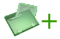
<style>
.page{position:relative;width:60px;height:39px;background:#ffffff}
.page>*{position:absolute;margin:0}
.t1{font:30px "CenturyGothic";color:#339900}
</style>
<div class="page">
<p class="t1" style="left:41px;top:13px;width:16px;height:16px">+</p>
</div>
